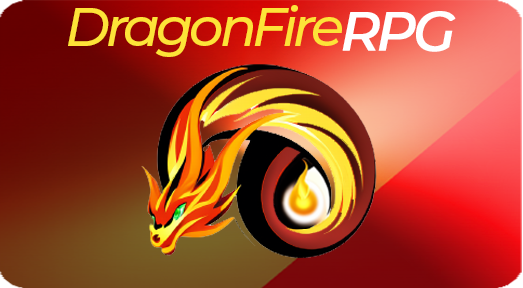
<style>
.page{position:relative;width:523px;height:288px}
.page>*{position:absolute;margin:0}
.t1{font:54.1px "Montserrat-MediumItalic";letter-spacing:-0.075em;color:#fde338}
.t2{font:54.1px "Montserrat-MediumItalic";letter-spacing:-0.075em;color:#ffffff;font-weight:bold}
</style>
<div class="page">
<p class="t1" style="left:68px;top:5px;width:274px;height:52px">DragonFire</p>
<p class="t2" style="left:342px;top:11px;width:114px;height:41px">RPG</p>
</div>
